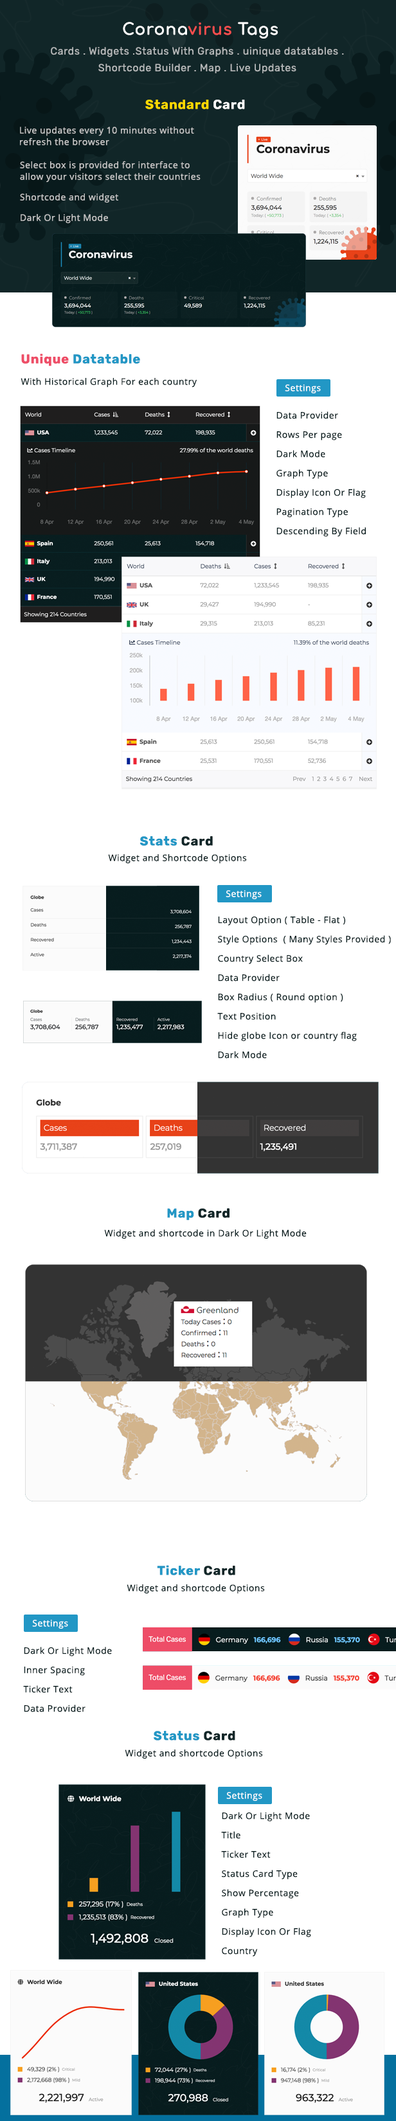
<style>
.page{position:relative;width:396px;height:2121px;background:#ffffff}
.page>*{position:absolute;margin:0}
.t1{font:16.1px "Comfortaa-Bold";letter-spacing:0.04em;color:#ffffff}
.t2{font:16.1px "Comfortaa-Bold";letter-spacing:0.04em;color:#f74e4e}
.t3{font:10.3px/16.7px "Rubik-Regular";letter-spacing:0.04em;color:#b6b9ba}
.t4{font:12.9px "Rubik-Bold";letter-spacing:0.04em;color:#ffd902}
.t5{font:12.9px "Rubik-Bold";letter-spacing:0.04em;color:#ffffff}
.t6{font:9px/11.6px "OpenSans-Regular";letter-spacing:0.04em;color:#c7c7c7}
.t7{font:9px "OpenSans-Regular";letter-spacing:0.04em;color:#c7c7c7}
.t8{font:12.9px "Rubik-Bold";letter-spacing:0.04em;color:#2297c5}
.t9{font:12.9px "Rubik-Bold";letter-spacing:0.04em;color:#ee4d67}
.t10{font:9px "OpenSans-Regular";letter-spacing:0.04em;color:#071c1e}
.t11{font:9px "OpenSans-Regular";letter-spacing:0.04em;color:#ffffff}
.t12{font:9px/19.3px "OpenSans-Regular";letter-spacing:0.04em;color:#071c1e}
.t13{font:12.9px "Rubik-Bold";letter-spacing:0.04em;color:#112628}
</style>
<div class="page">
<p class="t1" style="left:123px;top:22px;width:155px;height:17px">Corona<span class="t2">virus</span> Tags</p>
<p class="t3" style="left:51px;top:47px;width:293px;height:26px;text-align:center">Cards . Widgets .Status With Graphs . uinique datatables .<br>Shortcode Builder . Map . Live Updates</p>
<p class="t4" style="left:145px;top:100px;width:100px;height:9px">Standard <span class="t5">Card</span></p>
<p class="t6" style="left:20px;top:127px;width:174px;height:18px">Live updates every 10 minutes without<br>refresh the browser</p>
<p class="t6" style="left:20px;top:161px;width:181px;height:22px">Select box is provided for interface to<br>allow your visitors select their countries</p>
<p class="t7" style="left:20px;top:194px;width:98px;height:9px">Shortcode and widget</p>
<p class="t7" style="left:21px;top:214px;width:87px;height:10px">Dark Or Light Mode</p>
<p class="t8" style="left:21px;top:354px;width:119px;height:12px"><span class="t9">Unique </span>Datatable</p>
<p class="t10" style="left:21px;top:378px;width:176px;height:10px">With Historical Graph For each country</p>
<p class="t11" style="left:285px;top:384px;width:36px;height:9px">Settings</p>
<p class="t12" style="left:276px;top:411px;width:90px;height:126px">Data Provider<br>Rows Per page<br>Dark Mode<br>Graph Type<br>Display Icon Or Flag<br>Pagination Type<br>Descending By Field</p>
<p class="t8" style="left:140px;top:836px;width:73px;height:10px">Stats<span class="t13"> Card</span></p>
<p class="t10" style="left:108px;top:854px;width:139px;height:10px">Widget and Shortcode Options</p>
<p class="t11" style="left:226px;top:890px;width:36px;height:9px">Settings</p>
<p class="t12" style="left:217px;top:916px;width:174px;height:143px">Layout Option ( Table - Flat )<br>Style Options  ( Many Styles Provided )<br>Country Select Box<br>Data Provider<br>Box Radius ( Round option )<br>Text Position<br>Hide globe Icon or country flag<br>Dark Mode</p>
<p class="t13" style="left:167px;top:1209px;width:63px;height:12px"><span class="t8">Map </span>Card</p>
<p class="t10" style="left:104px;top:1230px;width:203px;height:9px">Widget and shortcode in Dark Or Light Mode</p>
<p class="t8" style="left:157px;top:1565px;width:78px;height:11px">Ticker <span class="t13">Card</span></p>
<p class="t10" style="left:127px;top:1585px;width:138px;height:9px">Widget and shortcode Options</p>
<p class="t11" style="left:32px;top:1620px;width:36px;height:9px">Settings</p>
<p class="t12" style="left:23px;top:1647px;width:89px;height:66px">Dark Or Light Mode<br>Inner Spacing<br>Ticker Text<br>Data Provider</p>
<p class="t8" style="left:154px;top:1731px;width:81px;height:10px">Status <span class="t13">Card</span></p>
<p class="t10" style="left:125px;top:1750px;width:138px;height:10px">Widget and shortcode Options</p>
<p class="t11" style="left:226px;top:1792px;width:36px;height:9px">Settings</p>
<p class="t12" style="left:221px;top:1812px;width:90px;height:145px">Dark Or Light Mode<br>Title<br>Ticker Text<br>Status Card Type<br>Show Percentage<br>Graph Type<br>Display Icon Or Flag<br>Country</p>
</div>
